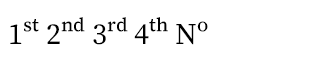
<style>
.page{position:relative;width:320px;height:64px;background:#ffffff}
.page>*{position:absolute;margin:0}
.t1{font:30px "SourceSerifRoman-Regular";color:#000000}
</style>
<div class="page">
<p class="t1" style="left:10px;top:17px;width:198px;height:28px">1st 2nd 3rd 4th No</p>
</div>
